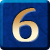
<style>
.page{position:relative;width:50px;height:50px}
.page>*{position:absolute;margin:0}
.t1{font:48.6px "Cambria";font-weight:bold;scale:1.13 1}
</style>
<div class="page">
<p class="t1" style="left:12px;top:8px;width:27px;height:34px">6</p>
</div>
